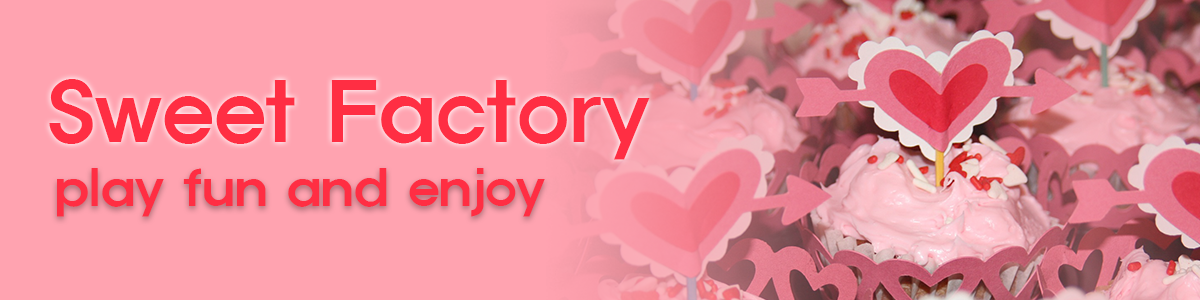
<style>
.page{position:relative;width:1200px;height:300px;background:#ffa3b0}
.page>*{position:absolute;margin:0}
.t1{font:79px "ExpoM-HM";color:#ff2e43}
.t2{font:48px "ExpoM-HM";color:#ff2e43}
</style>
<div class="page">
<p class="t1" style="left:49px;top:79px;width:601px;height:81px">Sweet Factory</p>
<p class="t2" style="left:57px;top:168px;width:488px;height:49px">play fun and enjoy</p>
</div>
